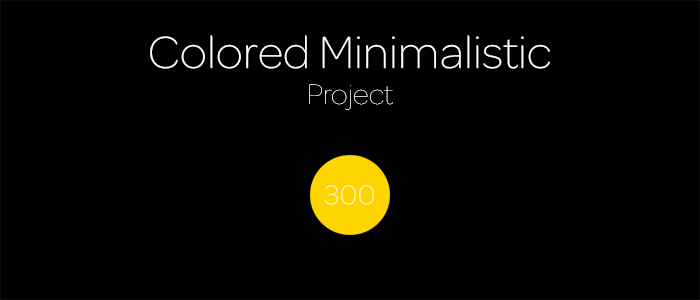
<style>
.page{position:relative;width:700px;height:300px;background:#000000}
.page>*{position:absolute;margin:0}
.t1{font:48px "Omnes-ExtraLight";letter-spacing:0.005em;color:#ffffff}
.t2{font:30px "Omnes-Hairline";letter-spacing:0.005em;color:#ffffff}
</style>
<div class="page">
<p class="t1" style="left:150px;top:35px;width:400px;height:75px;text-align:center">Colored Minimalistic<br><span class="t2">Project</span></p>
</div>
